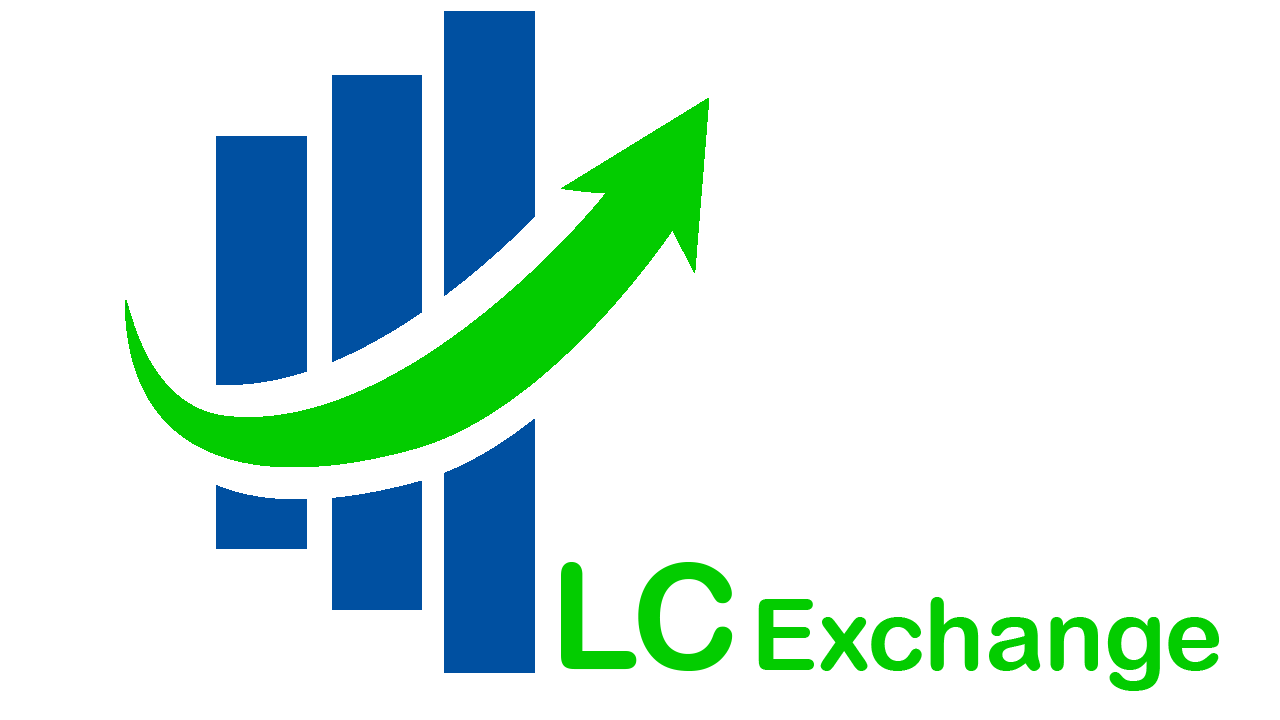
<style>
.page{position:relative;width:1280px;height:720px;background:#ffffff}
.page>*{position:absolute;margin:0}
.t1{font:146.7px "ArialRoundedMTBold";color:#03cc00}
.t2{font:100px "ArialRoundedMTBold";color:#03cc00}
</style>
<div class="page">
<p class="t1" style="left:561px;top:562px;width:172px;height:109px">LC</p>
<p class="t2" style="left:758px;top:597px;width:462px;height:94px">Exchange</p>
</div>
